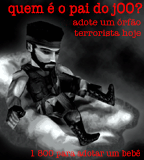
<style>
.page{position:relative;width:144px;height:160px}
.page>*{position:absolute;margin:0}
.t1{font:14.7px "AmericanTypewriter";letter-spacing:0.02em;color:#f80303;scale:0.9 1}
.t2{font:9.3px/10.7px "AmericanTypewriter";letter-spacing:0.02em;color:#f80303}
.t3{font:9.3px "AmericanTypewriter";letter-spacing:0.02em;color:#f80303;scale:0.88 1}
</style>
<div class="page">
<p class="t1" style="left:8px;top:2px;width:135px;height:14px">quem é o pai do jOO?</p>
<p class="t2" style="left:73px;top:18px;width:68px;height:20px;text-align:right">adote um órfão<br>terrorista hoje</p>
<p class="t3" style="left:31px;top:149px;width:109px;height:9px">1 800 para adotar um bebê</p>
</div>
